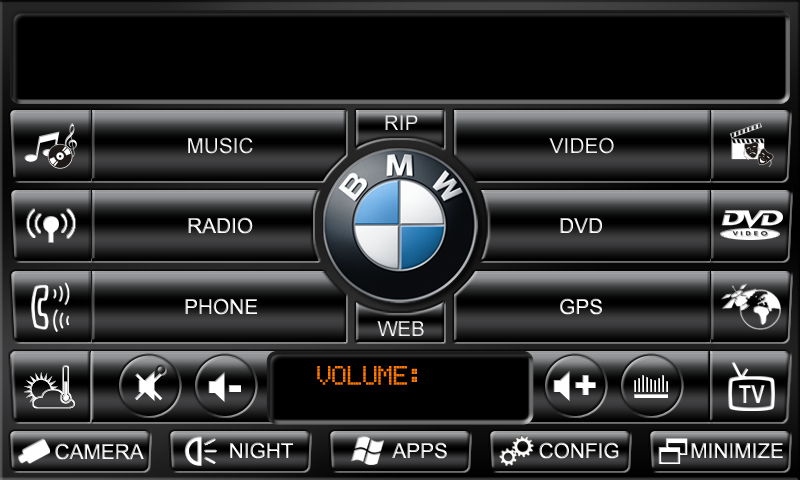
<style>
.page{position:relative;width:800px;height:480px;background:#000000}
.page>*{position:absolute;margin:0}
.t1{font:20.8px "ArialMT"}
.t2{font:25px "EricssonGA628";color:#ff7800}
.t3{font:20.8px "ArialMT";color:#ffffff}
</style>
<div class="page">
<p class="t1" style="left:385px;top:115px;width:33px;height:15px">RIP</p>
<p class="t1" style="left:188px;top:137px;width:65px;height:17px">MUSIC</p>
<p class="t1" style="left:549px;top:137px;width:65px;height:17px">VIDEO</p>
<p class="t1" style="left:188px;top:217px;width:65px;height:17px">RADIO</p>
<p class="t1" style="left:560px;top:218px;width:42px;height:15px">DVD</p>
<p class="t1" style="left:185px;top:298px;width:72px;height:17px">PHONE</p>
<p class="t1" style="left:560px;top:298px;width:42px;height:17px">GPS</p>
<p class="t1" style="left:377px;top:321px;width:47px;height:15px">WEB</p>
<p class="t2" style="left:317px;top:366px;width:100px;height:19px">VOLUME:</p>
<p class="t1" style="left:55px;top:443px;width:89px;height:17px">CAMERA</p>
<p class="t1" style="left:230px;top:442px;width:63px;height:17px">NIGHT</p>
<p class="t1" style="left:392px;top:442px;width:55px;height:17px">APPS</p>
<p class="t3" style="left:539px;top:442px;width:80px;height:17px">CONFIG</p>
<p class="t1" style="left:691px;top:443px;width:92px;height:15px">MINIMIZE</p>
</div>
